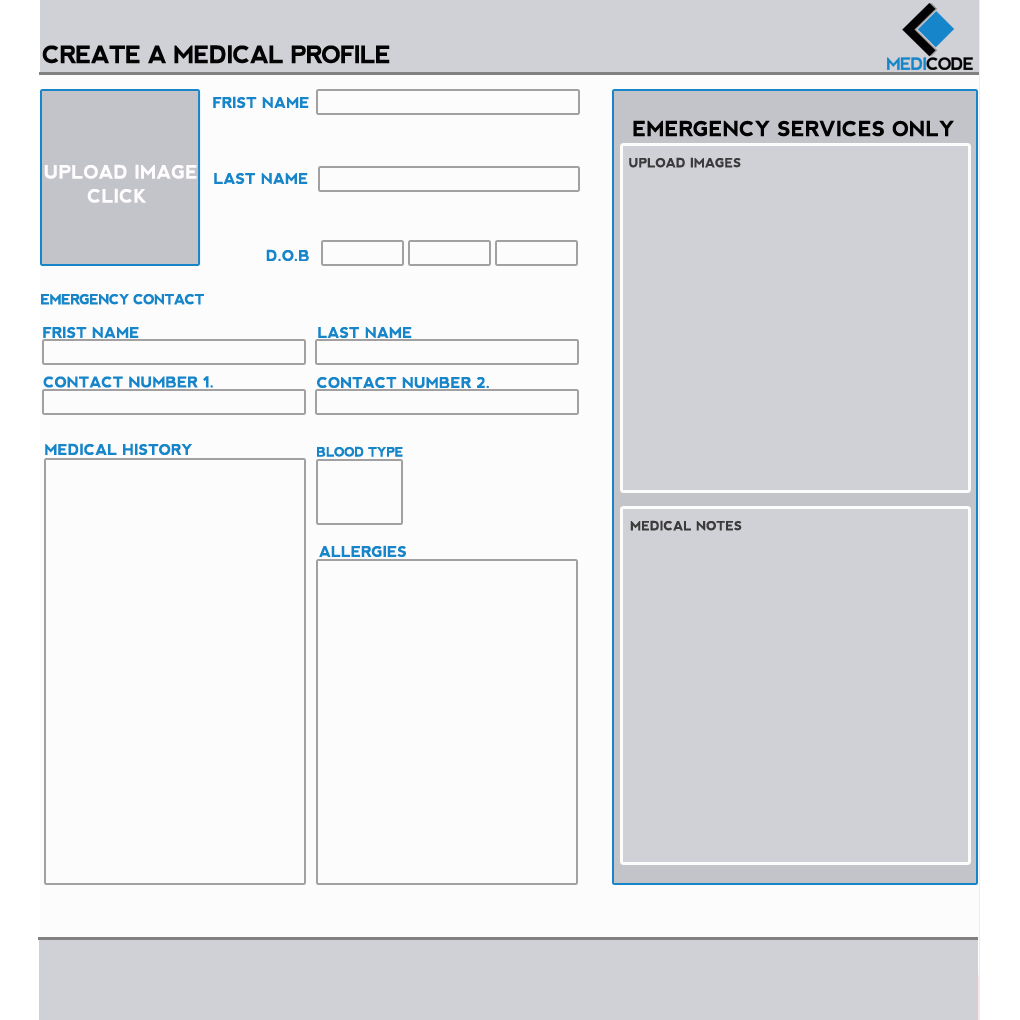
<style>
.page{position:relative;width:1020px;height:1020px;background:#fdfcfc}
.page>*{position:absolute;margin:0}
.t1{font:24px "nevis-Bold";letter-spacing:-0.04em;color:#030303}
.t2{font:15px "nevis-Bold";color:#1785c9}
.t3{font:20.7px "nevis-Bold";color:#010101}
.t4{font:12.7px "nevis-Bold";color:#3c3b3b}
.t5{font:18.7px "nevis-Bold";color:#fffcfd}
.t6{font:14px "nevis-Bold";letter-spacing:-0.04em;color:#1785c9}
.t7{font:13px "nevis-Bold";letter-spacing:-0.03em;color:#1785c9}
</style>
<div class="page">
<p class="t1" style="left:42px;top:45px;width:348px;height:19px">CREATE A MEDICAL PROFILE</p>
<p class="t2" style="left:213px;top:96px;width:96px;height:12px">FRIST NAME</p>
<p class="t3" style="left:633px;top:120px;width:321px;height:17px">EMERGENCY SERVICES ONLY</p>
<p class="t4" style="left:629px;top:157px;width:112px;height:11px">UPLOAD IMAGES</p>
<p class="t5" style="left:44px;top:164px;width:153px;height:15px">UPLOAD IMAGE</p>
<p class="t2" style="left:214px;top:173px;width:94px;height:11px">LAST NAME</p>
<p class="t5" style="left:87px;top:188px;width:60px;height:15px">CLICK</p>
<p class="t2" style="left:266px;top:249px;width:43px;height:12px">D.O.B</p>
<p class="t6" style="left:41px;top:294px;width:163px;height:11px">EMERGENCY CONTACT</p>
<p class="t2" style="left:43px;top:326px;width:96px;height:12px">FRIST NAME</p>
<p class="t2" style="left:318px;top:327px;width:94px;height:11px">LAST NAME</p>
<p class="t2" style="left:43px;top:376px;width:170px;height:12px">CONTACT NUMBER 1.</p>
<p class="t2" style="left:317px;top:377px;width:172px;height:11px">CONTACT NUMBER 2.</p>
<p class="t2" style="left:45px;top:443px;width:147px;height:12px">MEDICAL HISTORY</p>
<p class="t7" style="left:317px;top:446px;width:86px;height:11px">BLOOD TYPE</p>
<p class="t4" style="left:630px;top:520px;width:112px;height:11px">MEDICAL NOTES</p>
<p class="t2" style="left:319px;top:545px;width:87px;height:12px">ALLERGIES</p>
</div>
